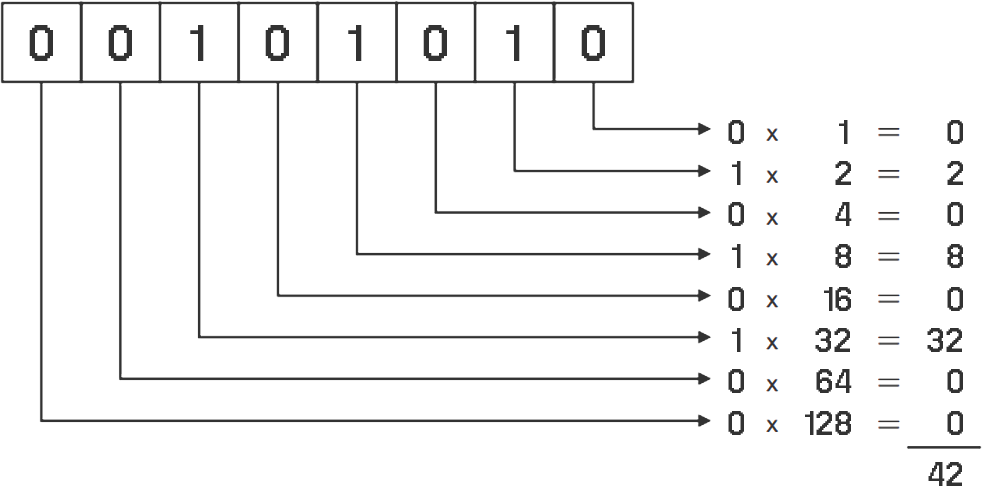
<style>
.page{position:relative;width:982px;height:487px;background:#ffffff}
.page>*{position:absolute;margin:0}
.t1{font:72px "NeueBit-Bold";color:#323232}
.t2{font:48px "NeueBit-Bold";color:#323232}
</style>
<div class="page">
<p class="t1" style="left:29px;top:25px;width:24px;height:36px">0</p>
<p class="t1" style="left:108px;top:25px;width:24px;height:36px">0</p>
<p class="t1" style="left:190px;top:25px;width:14px;height:36px">1</p>
<p class="t1" style="left:265px;top:25px;width:24px;height:36px">0</p>
<p class="t1" style="left:348px;top:25px;width:14px;height:36px">1</p>
<p class="t1" style="left:423px;top:25px;width:24px;height:36px">0</p>
<p class="t1" style="left:506px;top:25px;width:14px;height:36px">1</p>
<p class="t1" style="left:581px;top:25px;width:24px;height:36px">0</p>
<p class="t2" style="left:728px;top:120px;width:16px;height:24px">0</p>
<p class="t2" style="left:839px;top:120px;width:9px;height:24px">1</p>
<p class="t2" style="left:947px;top:120px;width:16px;height:24px">0</p>
<p class="t2" style="left:732px;top:161px;width:9px;height:24px">1</p>
<p class="t2" style="left:835px;top:161px;width:16px;height:24px">2</p>
<p class="t2" style="left:947px;top:161px;width:16px;height:24px">2</p>
<p class="t2" style="left:728px;top:202px;width:16px;height:24px">0</p>
<p class="t2" style="left:835px;top:202px;width:17px;height:24px">4</p>
<p class="t2" style="left:947px;top:202px;width:16px;height:24px">0</p>
<p class="t2" style="left:732px;top:244px;width:9px;height:24px">1</p>
<p class="t2" style="left:835px;top:244px;width:16px;height:24px">8</p>
<p class="t2" style="left:947px;top:244px;width:16px;height:24px">8</p>
<p class="t2" style="left:728px;top:287px;width:16px;height:24px">0</p>
<p class="t2" style="left:824px;top:287px;width:27px;height:24px">16</p>
<p class="t2" style="left:947px;top:287px;width:16px;height:24px">0</p>
<p class="t2" style="left:732px;top:328px;width:9px;height:24px">1</p>
<p class="t2" style="left:815px;top:328px;width:35px;height:24px">32</p>
<p class="t2" style="left:927px;top:328px;width:35px;height:24px">32</p>
<p class="t2" style="left:728px;top:369px;width:16px;height:24px">0</p>
<p class="t2" style="left:816px;top:369px;width:36px;height:24px">64</p>
<p class="t2" style="left:947px;top:369px;width:16px;height:24px">0</p>
<p class="t2" style="left:728px;top:411px;width:16px;height:24px">0</p>
<p class="t2" style="left:805px;top:411px;width:46px;height:24px">128</p>
<p class="t2" style="left:947px;top:411px;width:16px;height:24px">0</p>
<p class="t2" style="left:928px;top:462px;width:34px;height:24px">42</p>
</div>
